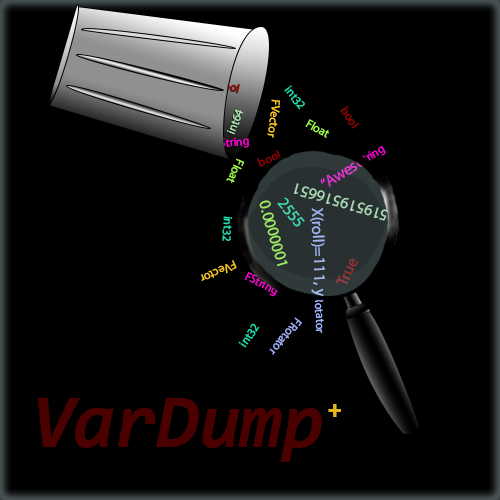
<style>
.page{position:relative;width:500px;height:500px;background:#000000}
.page>*{position:absolute;margin:0}
.t1{font:12px "MyriadPro-Regular";color:#1ee3ae}
.t2{font:12px "MyriadPro-Regular";color:#fdc822}
.t3{font:12px "MyriadPro-Regular";color:#abe3ae}
.t4{font:12px "MyriadPro-Regular";color:#920000}
.t5{font:12px "MyriadPro-Regular";color:#a0fd45}
.t6{font:12px "MyriadPro-Regular";color:#fc00d3}
.t7{font:16.1px "MyriadPro-Regular";color:#e530cf}
.t8{font:16.1px "MyriadPro-Regular";color:#abe3ae}
.t9{font:16.1px "MyriadPro-Regular";color:#3fdab4}
.t10{font:16.1px "MyriadPro-Regular";color:#a1ee65}
.t11{font:16.1px "MyriadPro-Regular";color:#a0b3fd}
.t12{font:16.1px "MyriadPro-Regular";color:#963031}
.t13{font:12px "MyriadPro-Regular";color:#a0b3fd}
.t14{font:76px "Consolas-BoldItalic";color:#4b0000}
.t15{font:25px "Arial-BoldItalicMT";color:#e6b61f}
</style>
<div class="page">
<p class="t1" style="left:284px;top:85px;width:21px;height:25px;rotate:51deg">int32</p>
<p class="t2" style="left:267px;top:99px;width:14px;height:39px;rotate:96deg">FVector</p>
<p class="t3" style="left:226px;top:109px;width:17px;height:26px;rotate:-68deg">int64</p>
<p class="t4" style="left:340px;top:105px;width:20px;height:24px;rotate:56deg">bool</p>
<p class="t5" style="left:305px;top:119px;width:24px;height:19px;rotate:29deg">Float</p>
<p class="t6" style="left:214px;top:137px;width:35px;height:11px;rotate:-5deg">FString</p>
<p class="t4" style="left:257px;top:150px;width:24px;height:17px;rotate:-24deg">bool</p>
<p class="t6" style="left:351px;top:146px;width:35px;height:23px;rotate:-32deg">FString</p>
<p class="t5" style="left:226px;top:158px;width:19px;height:25px;rotate:114deg">Float</p>
<p class="t7" style="left:320px;top:158px;width:45px;height:29px;rotate:-32deg">“Awesome</p>
<p class="t8" style="left:294px;top:183px;width:95px;height:38px;rotate:-164deg">519519516651</p>
<p class="t9" style="left:277px;top:197px;width:28px;height:30px;rotate:51deg">2555</p>
<p class="t10" style="left:259px;top:200px;width:29px;height:66px;rotate:74deg">0.0000001</p>
<p class="t11" style="left:310px;top:208px;width:15px;height:89px;rotate:88deg">X(roll)=111, y</p>
<p class="t1" style="left:222px;top:216px;width:11px;height:25px;rotate:94deg">int32</p>
<p class="t2" style="left:201px;top:260px;width:36px;height:21px;rotate:156deg">FVector</p>
<p class="t12" style="left:336px;top:258px;width:22px;height:26px;rotate:-66deg">True</p>
<p class="t6" style="left:244px;top:272px;width:34px;height:25px;rotate:27deg">FString</p>
<p class="t13" style="left:314px;top:290px;width:10px;height:43px;rotate:88deg">FRotator</p>
<p class="t13" style="left:269px;top:317px;width:33px;height:38px;rotate:128deg">FRotator</p>
<p class="t1" style="left:238px;top:323px;width:22px;height:25px;rotate:-56deg">int32</p>
<p class="t14" style="left:37px;top:398px;width:285px;height:64px">VarDump</p>
<p class="t15" style="left:328px;top:404px;width:13px;height:13px">+</p>
</div>
